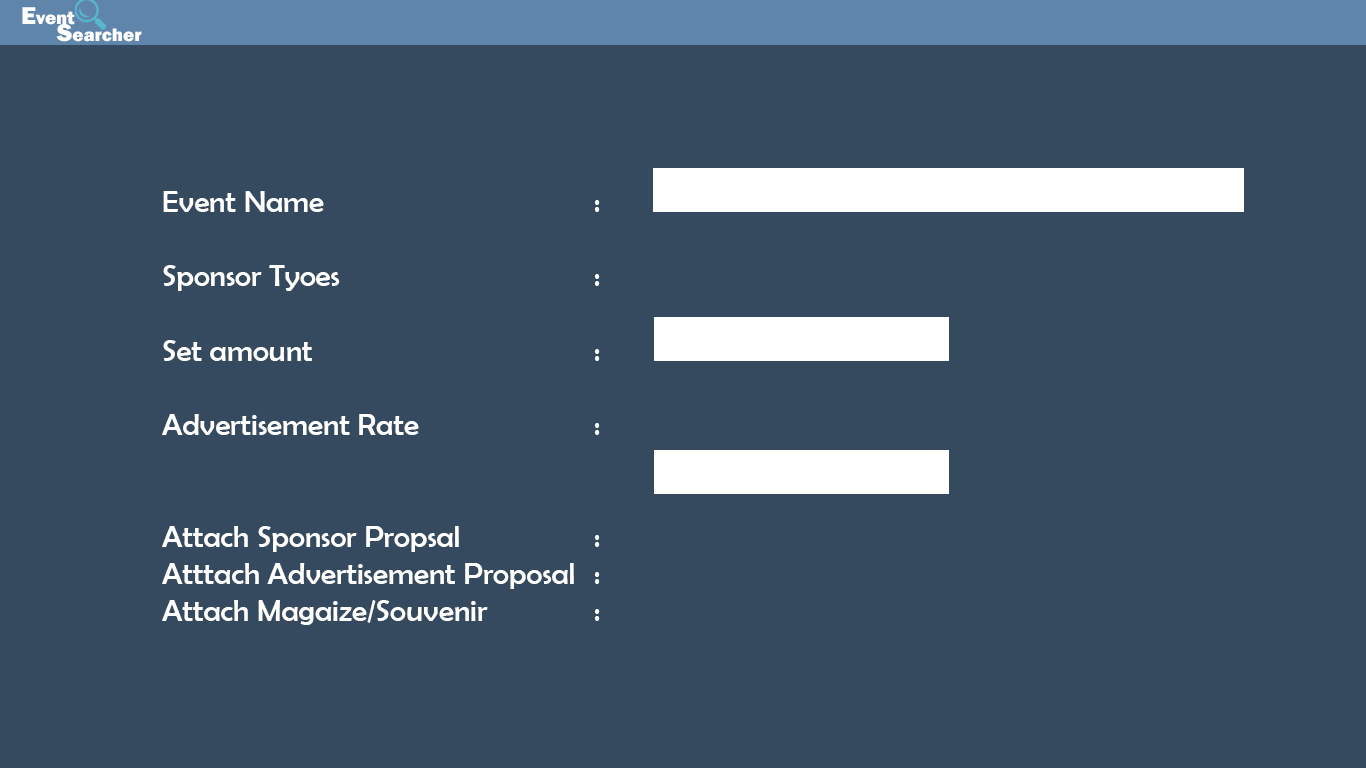
<style>
.page{position:relative;width:1366px;height:768px;background:#35495f}
.page>*{position:absolute;margin:0}
.t1{font:18.8px "FranklinGothic-Heavy";color:#ffffff}
.t2{font:25.1px "FranklinGothic-Heavy";color:#ffffff}
.t3{font:31px "BerlinSansFB-Reg";color:#ffffff}
</style>
<div class="page">
<p class="t1" style="left:22px;top:7px;width:53px;height:18px"><span class="t2">E</span>vent</p>
<p class="t1" style="left:56px;top:24px;width:86px;height:18px"><span class="t2">S</span>earcher</p>
<p class="t3" style="left:162px;top:191px;width:438px;height:434px">Event Name        :<br><br>Sponsor Tyoes        :<br><br>Set amount        : <br><br>Advertisement Rate     : <br><br><br>Attach Sponsor Propsal    :<br>Atttach Advertisement Proposal :<br>Attach Magaize/Souvenir   :</p>
</div>
